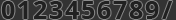
<style>
.page{position:relative;width:176px;height:20px;background:#333333}
.page>*{position:absolute;margin:0}
.t1{font:25px "OpenSans-Bold";letter-spacing:0.06em;color:#212121}
</style>
<div class="page">
<p class="t1" style="left:1px;top:1px;width:14px;height:18px">0</p>
<p class="t1" style="left:18px;top:1px;width:10px;height:18px">1</p>
<p class="t1" style="left:34px;top:1px;width:13px;height:18px">2</p>
<p class="t1" style="left:50px;top:1px;width:13px;height:18px">3</p>
<p class="t1" style="left:65px;top:1px;width:14px;height:18px">4</p>
<p class="t1" style="left:82px;top:1px;width:13px;height:18px">5</p>
<p class="t1" style="left:97px;top:1px;width:14px;height:18px">6</p>
<p class="t1" style="left:113px;top:1px;width:14px;height:18px">7</p>
<p class="t1" style="left:129px;top:1px;width:14px;height:18px">8</p>
<p class="t1" style="left:145px;top:1px;width:14px;height:18px">9</p>
<p class="t1" style="left:162px;top:1px;width:11px;height:18px">/</p>
</div>
